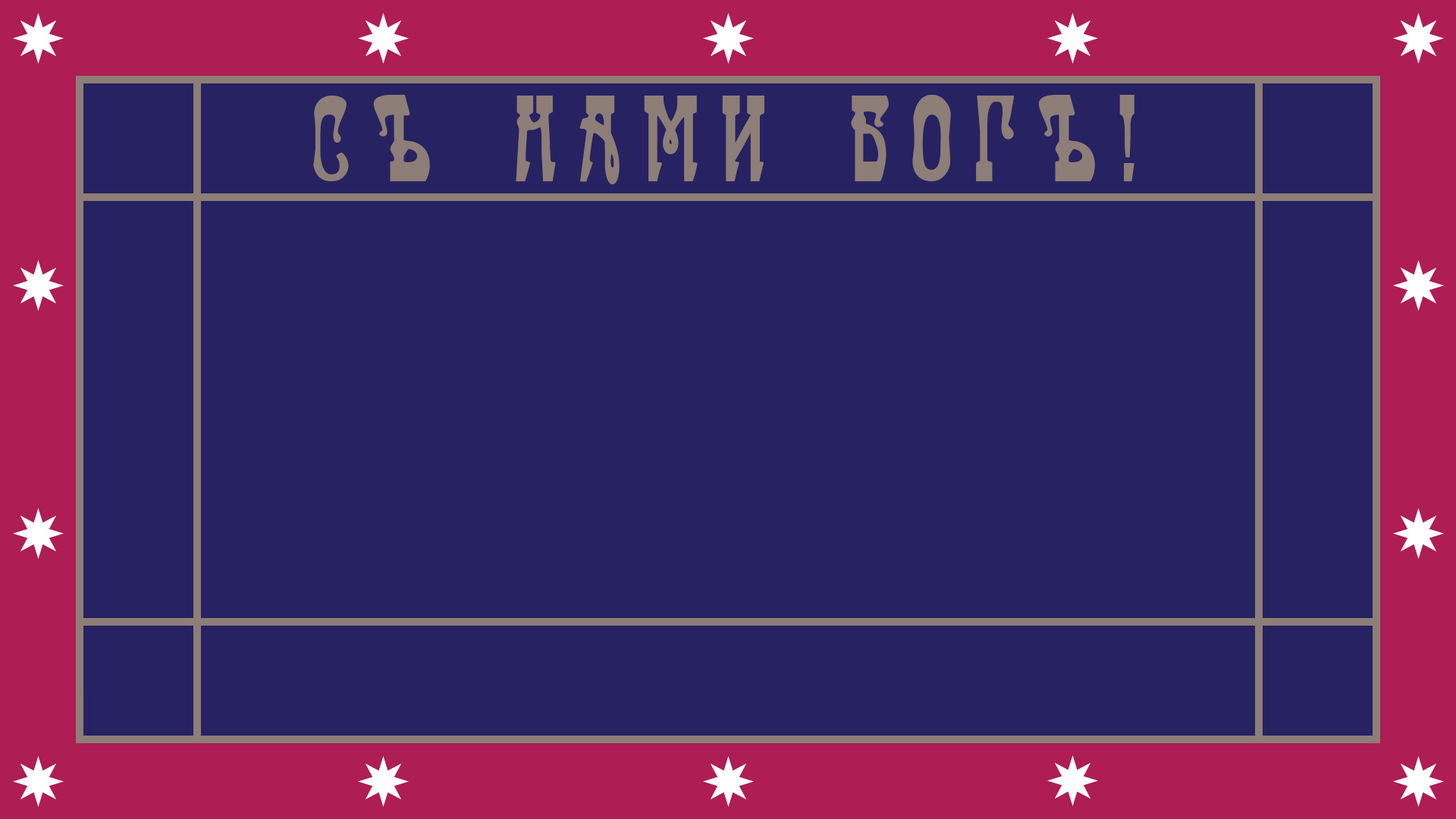
<style>
.page{position:relative;width:1456px;height:819px;background:#272262}
.page>*{position:absolute;margin:0}
.t1{font:107.9px "Traktir-Modern";letter-spacing:0.2em;color:#8d7e77}
</style>
<div class="page">
<p class="t1" style="left:313px;top:95px;width:821px;height:89px">СЪ НАМИ БОГЪ!</p>
</div>
